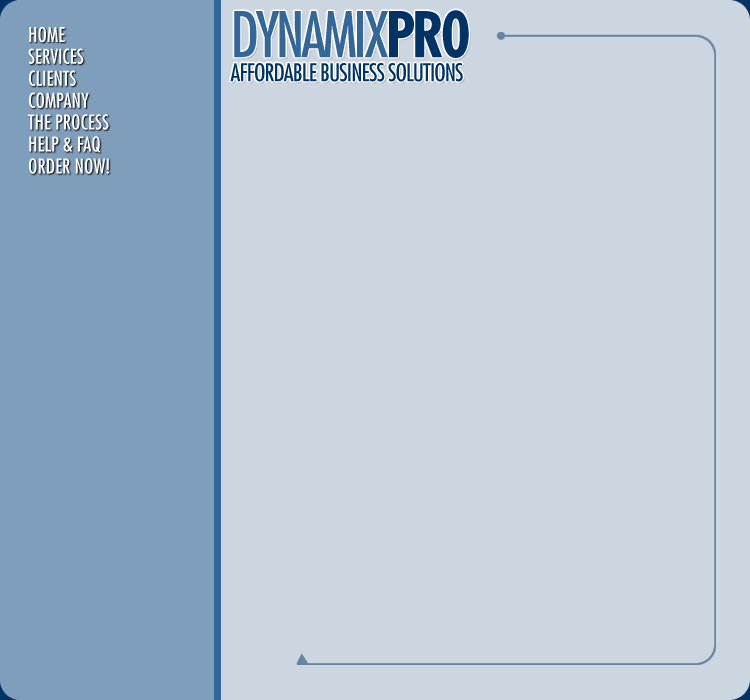
<style>
.page{position:relative;width:750px;height:700px;background:#ccd6e0}
.page>*{position:absolute;margin:0}
.t1{font:24px/24px "Futura-Condensed";letter-spacing:-0.04em;color:#003366}
.t2{font:61.3px/24px "Futura-Condensed";letter-spacing:-0.06em;color:#336699}
.t3{font:61.3px/24px "Futura-CondensedBold";letter-spacing:-0.06em;color:#003366}
.t4{font:20px/21.9px "Futura-Condensed";color:#ffffff}
</style>
<div class="page">
<p class="t1" style="left:230px;top:10px;width:239px;height:72px"><span class="t2">DYNAMIX</span><span class="t3">PR0<br></span>AFFORDABLE BUSINESS SOLUTIONS</p>
<p class="t4" style="left:8px;top:24px;width:122px;height:161px">HOME<br>SERVICES<br>CLIENTS<br>COMPANY<br>THE PROCESS<br>HELP &amp; FAQ<br>ORDER NOW!</p>
</div>
